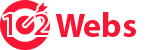
<style>
.page{position:relative;width:159px;height:50px;background:#ffffff}
.page>*{position:absolute;margin:0}
.t1{font:34px "MyriadPro-Bold";color:#f71735}
</style>
<div class="page">
<p class="t1" style="left:55px;top:12px;width:81px;height:25px">Webs</p>
</div>
